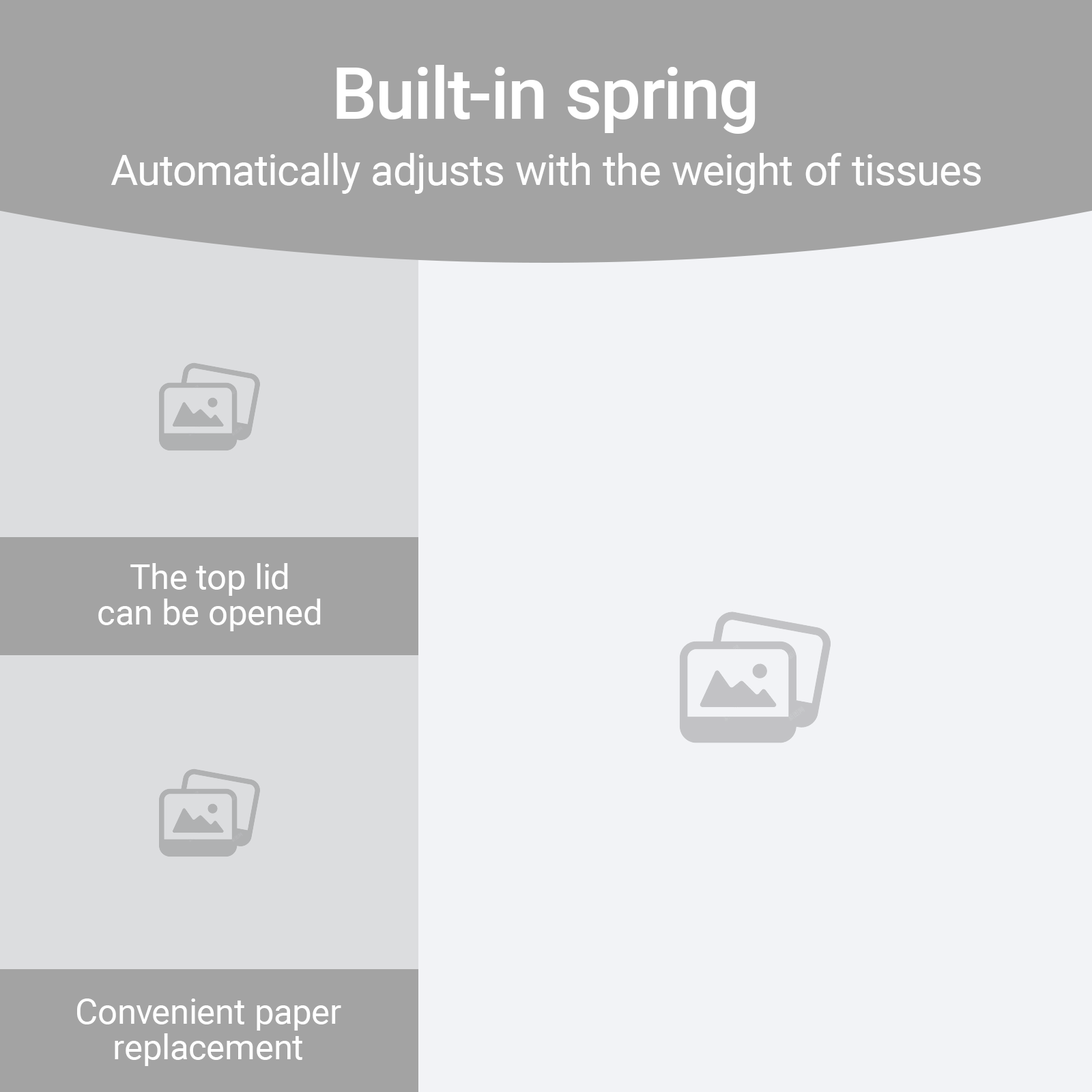
<style>
.page{position:relative;width:1092px;height:1092px;background:#f2f3f6}
.page>*{position:absolute;margin:0}
.t1{font:71.3px "Roboto-Medium";color:#ffffff}
.t2{font:42.2px "Roboto-Regular";color:#ffffff}
.t3{font:34.9px/34.9px "Roboto-Regular";color:#ffffff}
</style>
<div class="page">
<p class="t1" style="left:336px;top:65px;width:420px;height:69px">Built-in spring</p>
<p class="t2" style="left:111px;top:153px;width:870px;height:41px">Automatically adjusts with the weight of tissues</p>
<p class="t3" style="left:98px;top:563px;width:223px;height:68px;text-align:center">The top lid<br>can be opened</p>
<p class="t3" style="left:77px;top:998px;width:264px;height:68px;text-align:center">Convenient paper<br>replacement</p>
</div>
